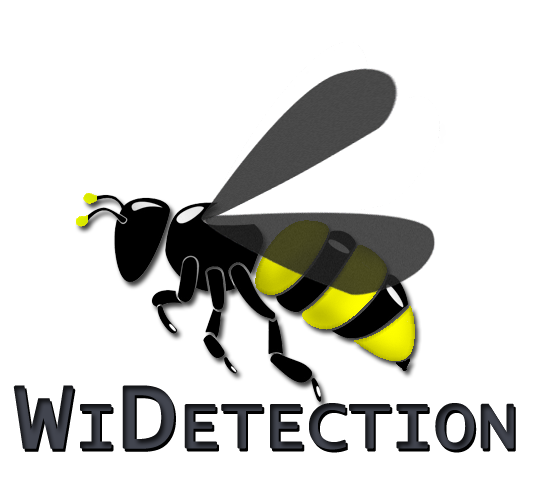
<style>
.page{position:relative;width:536px;height:478px;background:#ffffff}
.page>*{position:absolute;margin:0}
.t1{font:96.7px "LucidaConsole";color:#42454f;font-variant:small-caps;font-weight:bold}
</style>
<div class="page">
<p class="t1" style="left:13px;top:385px;width:501px;height:65px">WiDetection</p>
</div>
